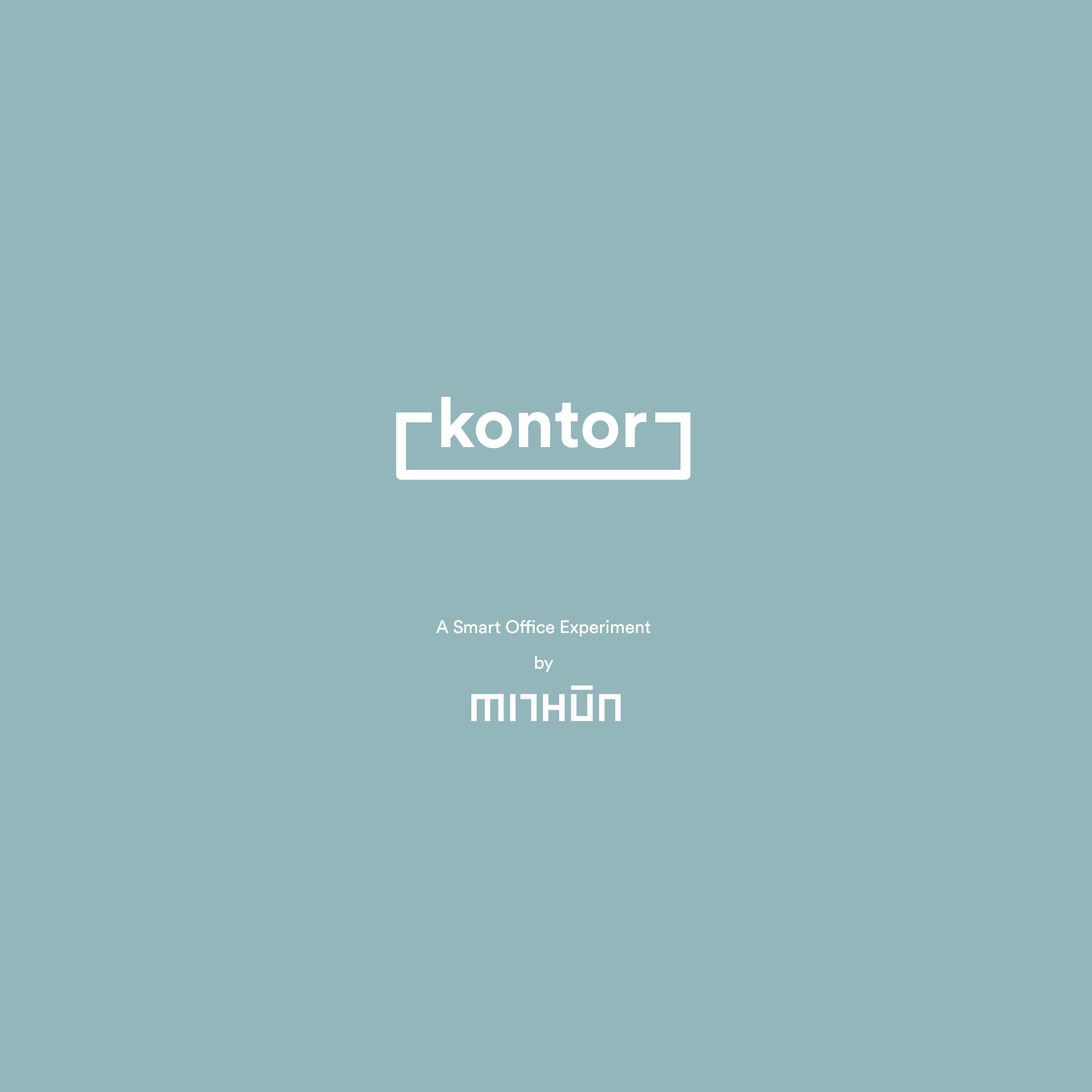
<style>
.page{position:relative;width:1092px;height:1092px;background:#93b6bb}
.page>*{position:absolute;margin:0}
.t1{font:17.8px/17.8px "CircularStd-Book";color:#ffffff}
</style>
<div class="page">
<p class="t1" style="left:436px;top:620px;width:214px;height:53px;text-align:center">A Smart Office Experiment<br><br>by</p>
</div>
